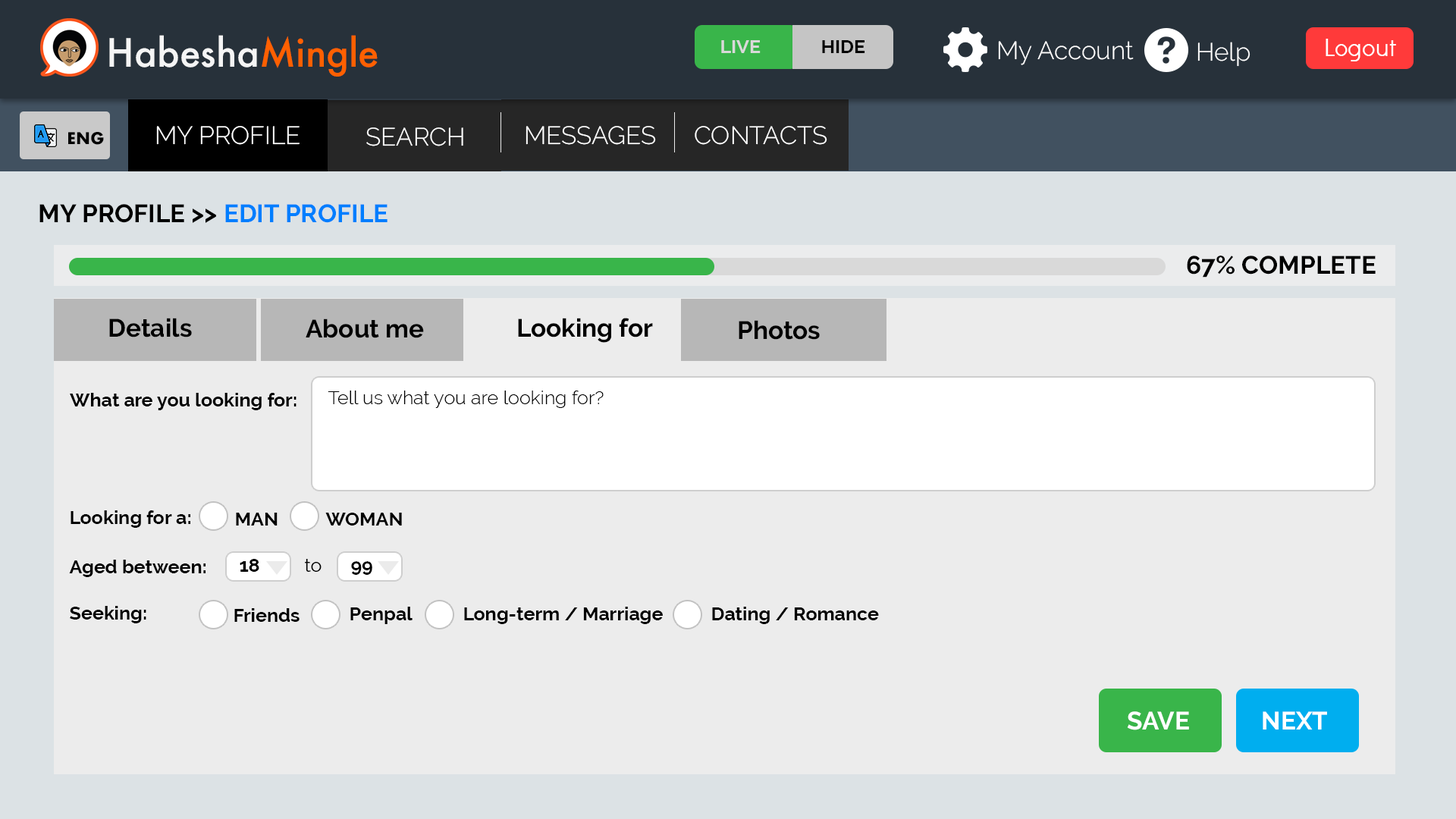
<style>
.page{position:relative;width:1456px;height:819px;background:#ececec}
.page>*{position:absolute;margin:0}
.t1{font:37.9px "Futura-Medium";color:#f5f5f5}
.t2{font:37.9px "Futura-Medium";color:#ff6000}
.t3{font:19px "Raleway-Bold";color:#d9d9d9}
.t4{font:19px "Raleway-Bold";color:#000000}
.t5{font:25.3px "Raleway-Light";color:#ffffff}
.t6{font:25.3px "DidactGothic";color:#ffffff}
.t7{font:25.3px "Raleway-Bold";color:#000000}
.t8{font:25.3px "Raleway-Bold";color:#007eff}
.t9{font:19px "Raleway-Light";color:#000000}
.t10{font:19px "Raleway-Regular";color:#000000}
.t11{font:25.3px "Raleway-Bold";color:#ffffff}
</style>
<div class="page">
<p class="t1" style="left:109px;top:35px;width:269px;height:42px">Habesha<span class="t2">Mingle</span></p>
<p class="t3" style="left:721px;top:40px;width:40px;height:13px">LIVE</p>
<p class="t4" style="left:822px;top:40px;width:43px;height:13px">HIDE</p>
<p class="t5" style="left:998px;top:41px;width:136px;height:24px">My Account</p>
<p class="t5" style="left:1197px;top:42px;width:53px;height:25px">Help</p>
<p class="t6" style="left:1326px;top:39px;width:70px;height:22px">Logout</p>
<p class="t5" style="left:156px;top:126px;width:144px;height:19px">MY PROFILE</p>
<p class="t5" style="left:526px;top:126px;width:130px;height:19px">MESSAGES</p>
<p class="t5" style="left:695px;top:126px;width:132px;height:19px">CONTACTS</p>
<p class="t5" style="left:366px;top:127px;width:97px;height:19px">SEARCH</p>
<p class="t7" style="left:39px;top:204px;width:349px;height:19px">MY PROFILE &gt;&gt; <span class="t8">EDIT PROFILE</span></p>
<p class="t7" style="left:1187px;top:256px;width:189px;height:22px">67% COMPLETE</p>
<p class="t7" style="left:109px;top:318px;width:83px;height:19px">Details</p>
<p class="t7" style="left:518px;top:318px;width:135px;height:25px">Looking for</p>
<p class="t7" style="left:306px;top:318px;width:118px;height:20px">About me</p>
<p class="t7" style="left:739px;top:320px;width:81px;height:20px">Photos</p>
<p class="t4" style="left:70px;top:393px;width:227px;height:17px">What are you looking for:</p>
<p class="t9" style="left:328px;top:391px;width:276px;height:17px">Tell us what you are looking for?</p>
<p class="t4" style="left:71px;top:510px;width:119px;height:18px">Looking for a:</p>
<p class="t4" style="left:236px;top:513px;width:42px;height:13px">MAN</p>
<p class="t4" style="left:325px;top:513px;width:77px;height:13px">WOMAN</p>
<p class="t4" style="left:69px;top:560px;width:137px;height:17px">Aged between:</p>
<p class="t4" style="left:240px;top:559px;width:19px;height:13px">18</p>
<p class="t10" style="left:305px;top:559px;width:17px;height:13px">to</p>
<p class="t4" style="left:351px;top:561px;width:21px;height:14px">99</p>
<p class="t4" style="left:70px;top:606px;width:76px;height:17px">Seeking:</p>
<p class="t4" style="left:234px;top:608px;width:66px;height:14px">Friends</p>
<p class="t4" style="left:350px;top:607px;width:63px;height:17px">Penpal</p>
<p class="t4" style="left:464px;top:607px;width:199px;height:17px">Long-term / Marriage</p>
<p class="t4" style="left:712px;top:607px;width:167px;height:17px">Dating / Romance</p>
<p class="t11" style="left:1127px;top:711px;width:62px;height:19px">SAVE</p>
<p class="t11" style="left:1263px;top:711px;width:64px;height:19px">NEXT</p>
</div>
